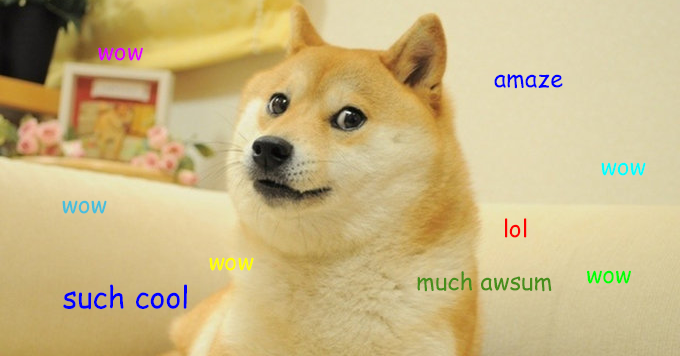
<style>
.page{position:relative;width:680px;height:356px}
.page>*{position:absolute;margin:0}
.t1{font:24px "ComicSansMS";color:#e400ff}
.t2{font:24px "ComicSansMS";color:#0000ff}
.t3{font:24px "ComicSansMS";color:#00ffff}
.t4{font:24px "ComicSansMS";color:#49bedb}
.t5{font:24px "ComicSansMS";color:#ff0000}
.t6{font:24px "ComicSansMS";color:#ffff00}
.t7{font:24px "ComicSansMS";color:#00ff06}
.t8{font:24px "ComicSansMS";color:#468e1a}
.t9{font:30px "ComicSansMS";color:#0000ff}
</style>
<div class="page">
<p class="t1" style="left:98px;top:47px;width:45px;height:14px">wow</p>
<p class="t2" style="left:494px;top:74px;width:69px;height:15px">amaze</p>
<p class="t3" style="left:601px;top:162px;width:45px;height:14px">wow</p>
<p class="t4" style="left:62px;top:200px;width:45px;height:14px">wow</p>
<p class="t5" style="left:505px;top:218px;width:22px;height:20px">lol</p>
<p class="t6" style="left:209px;top:257px;width:45px;height:14px">wow</p>
<p class="t7" style="left:587px;top:270px;width:44px;height:14px">wow</p>
<p class="t8" style="left:417px;top:271px;width:135px;height:21px">much awsum</p>
<p class="t9" style="left:63px;top:284px;width:124px;height:26px">such cool</p>
</div>
